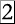
<style>
.page{position:relative;width:15px;height:24px;background:#ffffff}
.page>*{position:absolute;margin:0}
.t1{font:24px "Garamond";color:#000000}
</style>
<div class="page">
<p class="t1" style="left:2px;top:3px;width:11px;height:17px">2</p>
</div>
